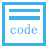
<style>
.page{position:relative;width:48px;height:48px;background:#ffffff}
.page>*{position:absolute;margin:0}
.t1{font:14px "SimSun";color:#3bb2e8}
</style>
<div class="page">
<p class="t1" style="left:10px;top:24px;width:28px;height:10px">code</p>
</div>
